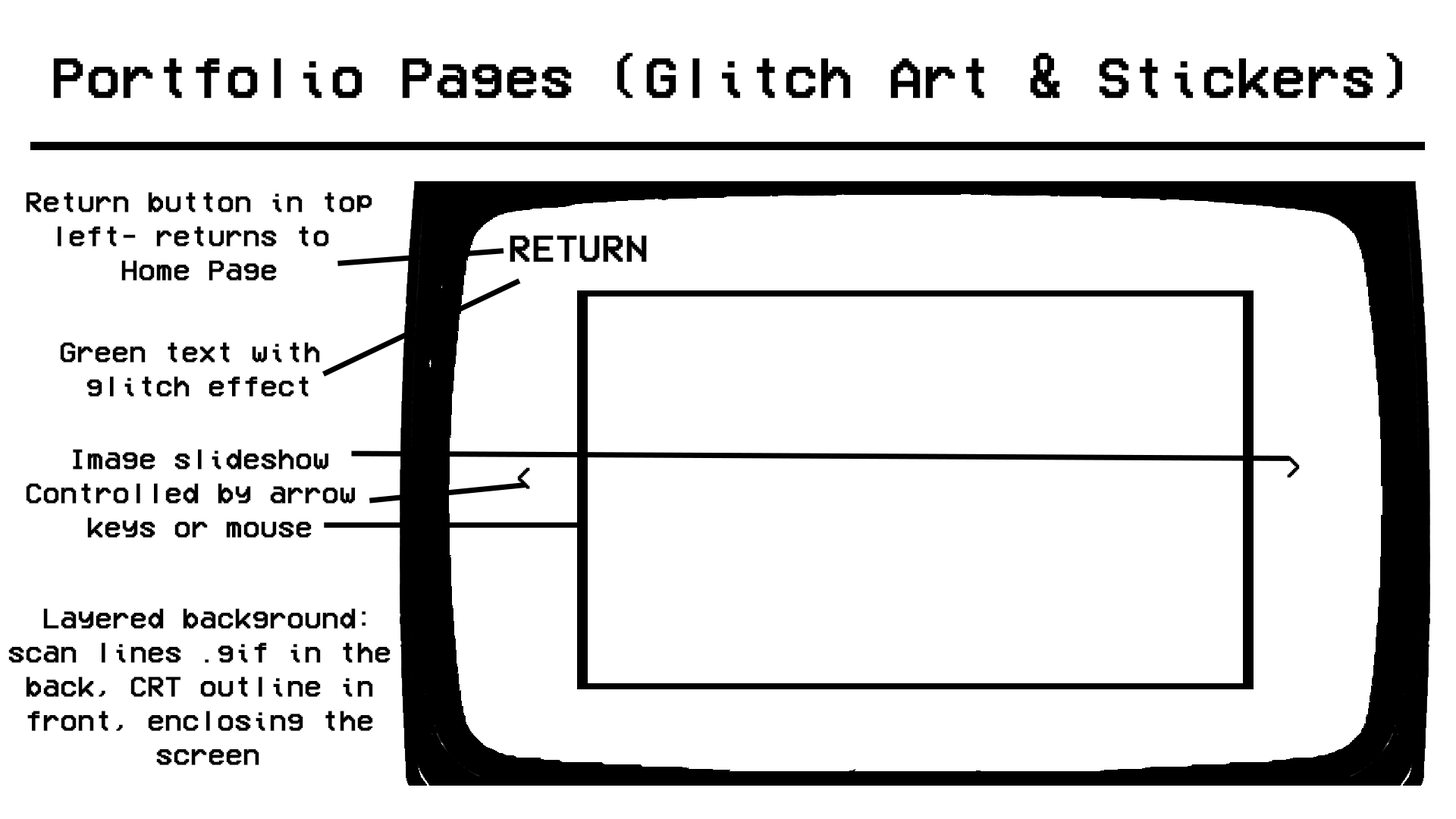
<style>
.page{position:relative;width:1456px;height:819px;background:#ffffff}
.page>*{position:absolute;margin:0}
.t1{font:56.9px "VCROSDMono";color:#000000;font-weight:bold}
.t2{font:28.4px "VCROSDMono";color:#000000;font-weight:bold}
.t3{font:37.9px "VCROSDMono";color:#000000;font-weight:bold}
</style>
<div class="page">
<p class="t1" style="left:53px;top:52px;width:1349px;height:47px">Portfolio Pages (Glitch Art &amp; Stickers)</p>
<p class="t2" style="left:26px;top:192px;width:346px;height:89px;text-align:center">Return button in top<br>left- returns to <br>Home Page</p>
<p class="t3" style="left:510px;top:235px;width:137px;height:27px">RETURN</p>
<p class="t2" style="left:60px;top:342px;width:260px;height:55px;text-align:center">Green text with <br>glitch effect</p>
<p class="t2" style="left:26px;top:449px;width:329px;height:89px;text-align:center">Image slideshow<br>Controlled by arrow <br>keys or mouse</p>
<p class="t2" style="left:1287px;top:456px;width:13px;height:22px">&gt;</p>
<p class="t2" style="left:517px;top:467px;width:13px;height:22px">&lt;</p>
<p class="t2" style="left:8px;top:608px;width:383px;height:157px;text-align:center">Layered background:<br>scan lines .gif in the <br>back, CRT outline in <br>front, enclosing the <br>screen</p>
</div>
